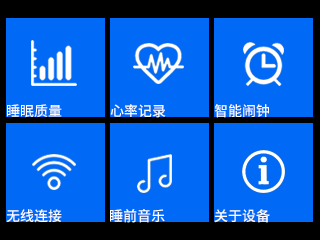
<style>
.page{position:relative;width:320px;height:240px;background:#0069f6}
.page>*{position:absolute;margin:0}
.t1{font:14px "SourceHanSansSC-Medium";color:#ffffff}
</style>
<div class="page">
<p class="t1" style="left:7px;top:104px;width:55px;height:14px">睡眠质量</p>
<p class="t1" style="left:110px;top:104px;width:56px;height:14px">心率记录</p>
<p class="t1" style="left:214px;top:104px;width:55px;height:14px">智能闹钟</p>
<p class="t1" style="left:6px;top:209px;width:56px;height:14px">无线连接</p>
<p class="t1" style="left:110px;top:209px;width:55px;height:14px">睡前音乐</p>
<p class="t1" style="left:214px;top:209px;width:56px;height:14px">关于设备</p>
</div>
